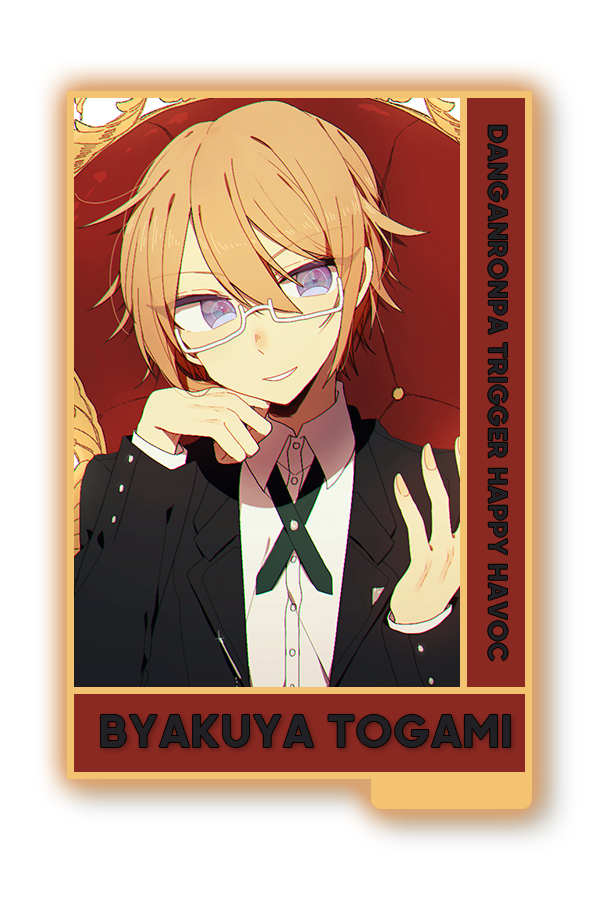
<style>
.page{position:relative;width:600px;height:900px;background:#ffffff}
.page>*{position:absolute;margin:0}
.t1{font:26px "Retroica";color:#221c2a}
.t2{font:44.6px "Retroica";color:#221c2a}
</style>
<div class="page">
<p class="t1" style="left:488px;top:125px;width:20px;height:536px;rotate:90deg">DANGANRONPA TRIGGER HAPPY HAVOC</p>
<p class="t2" style="left:101px;top:715px;width:409px;height:32px">BYAKUYA TOGAMI</p>
</div>
